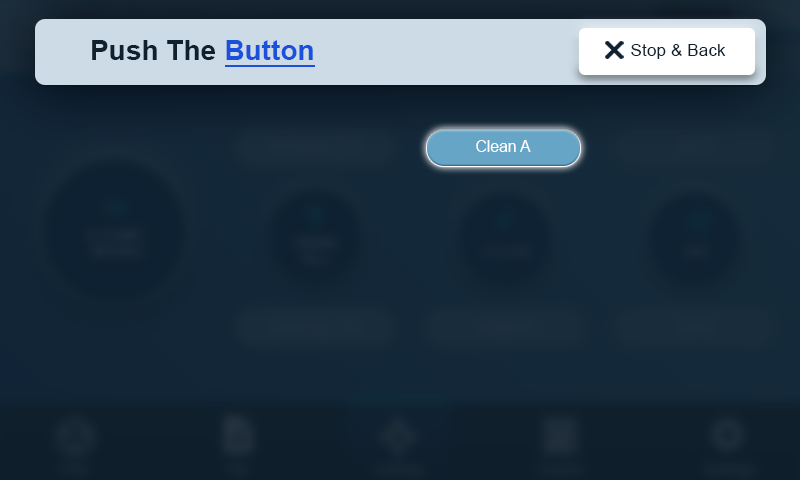
<style>
.page{position:relative;width:800px;height:480px}
.page>*{position:absolute;margin:0}
.t1{font:27.8px "Arial-BoldMT";letter-spacing:0.01em;color:#0f202f}
.t2{font:27.8px "Arial-BoldMT";letter-spacing:0.01em;color:#1b51da}
.t3{font:17.1px "ArialMT";letter-spacing:0.01em;color:#0f202f}
.t4{font:15.6px "ArialMT";color:#ffffff}
</style>
<div class="page">
<p class="t1" style="left:92px;top:40px;width:221px;height:20px">Push The <span class="t2">Button</span></p>
<p class="t3" style="left:631px;top:44px;width:95px;height:15px">Stop &amp; Back</p>
<p class="t4" style="left:476px;top:140px;width:55px;height:12px">Clean A</p>
</div>
